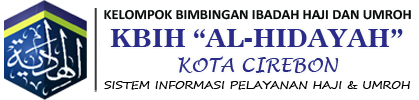
<style>
.page{position:relative;width:419px;height:100px;background:#ffffff}
.page>*{position:absolute;margin:0}
.t1{font:14px "Calibri-Bold";color:#090d0c}
.t2{font:25px "News701BT-BoldA";color:#2b2b8a}
.t3{font:19px "LucidaHandwriting-Italic";color:#2b2b8a}
.t4{font:11px "SegoePrint";color:#020202;scale:1.07 1}
</style>
<div class="page">
<p class="t1" style="left:104px;top:9px;width:307px;height:11px">KELOMPOK BIMBINGAN IBADAH HAJI DAN UMROH</p>
<p class="t2" style="left:110px;top:29px;width:293px;height:18px">KBIH “AL-HIDAYAH”</p>
<p class="t3" style="left:178px;top:56px;width:161px;height:17px">KOTA CIREBON</p>
<p class="t4" style="left:104px;top:81px;width:306px;height:9px">SISTEM INFORMASI PELAYANAN HAJI &amp; UMROH</p>
</div>
